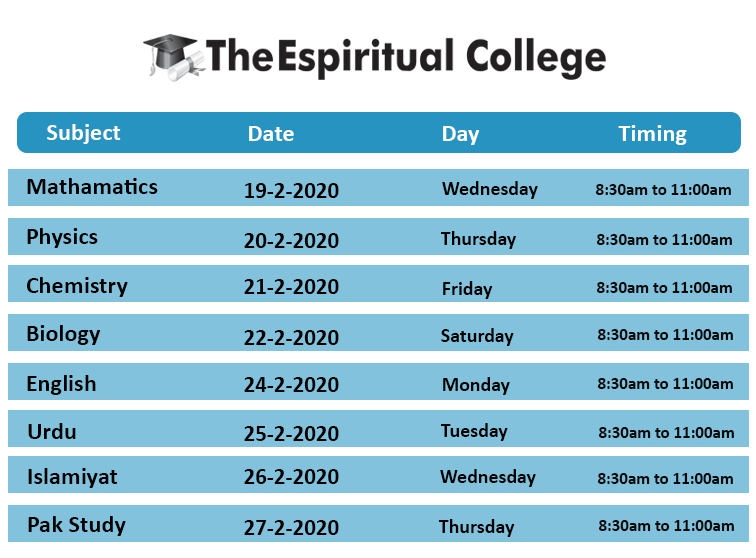
<style>
.page{position:relative;width:756px;height:558px;background:#83c2dc}
.page>*{position:absolute;margin:0}
.t1{font:24.3px "Calibri-Bold";color:#fffefe}
.t2{font:24.3px "Calibri-Bold";color:#ffffff}
.t3{font:24.3px "Calibri-Bold";color:#000000}
.t4{font:23px "Calibri-Bold";color:#000000}
.t5{font:19.9px "Calibri-Bold";color:#000000}
.t6{font:16.9px "Calibri-Bold";color:#0a0a0a}
</style>
<div class="page">
<p class="t1" style="left:47px;top:124px;width:74px;height:20px">Subject</p>
<p class="t2" style="left:249px;top:126px;width:45px;height:15px">Date</p>
<p class="t2" style="left:443px;top:126px;width:37px;height:19px">Day</p>
<p class="t2" style="left:618px;top:125px;width:69px;height:20px">Timing</p>
<p class="t3" style="left:27px;top:178px;width:131px;height:16px">Mathamatics</p>
<p class="t4" style="left:245px;top:183px;width:94px;height:15px">19-2-2020</p>
<p class="t5" style="left:442px;top:181px;width:96px;height:18px">Wednesday</p>
<p class="t6" style="left:595px;top:184px;width:136px;height:11px">8:30am to 11:00am</p>
<p class="t3" style="left:27px;top:228px;width:71px;height:20px">Physics</p>
<p class="t4" style="left:244px;top:233px;width:95px;height:15px">20-2-2020</p>
<p class="t5" style="left:440px;top:231px;width:76px;height:18px">Thursday</p>
<p class="t6" style="left:596px;top:234px;width:136px;height:11px">8:30am to 11:00am</p>
<p class="t3" style="left:27px;top:277px;width:101px;height:20px">Chemistry</p>
<p class="t4" style="left:244px;top:279px;width:95px;height:15px">21-2-2020</p>
<p class="t5" style="left:443px;top:281px;width:50px;height:18px">Friday</p>
<p class="t6" style="left:596px;top:282px;width:136px;height:11px">8:30am to 11:00am</p>
<p class="t3" style="left:27px;top:325px;width:74px;height:20px">Biology</p>
<p class="t5" style="left:441px;top:328px;width:73px;height:18px">Saturday</p>
<p class="t6" style="left:597px;top:329px;width:136px;height:11px">8:30am to 11:00am</p>
<p class="t4" style="left:244px;top:330px;width:95px;height:15px">22-2-2020</p>
<p class="t3" style="left:27px;top:375px;width:69px;height:20px">English</p>
<p class="t4" style="left:244px;top:377px;width:95px;height:15px">24-2-2020</p>
<p class="t5" style="left:443px;top:377px;width:67px;height:18px">Monday</p>
<p class="t6" style="left:597px;top:378px;width:136px;height:11px">8:30am to 11:00am</p>
<p class="t3" style="left:28px;top:423px;width:48px;height:16px">Urdu</p>
<p class="t5" style="left:440px;top:423px;width:68px;height:18px">Tuesday</p>
<p class="t4" style="left:244px;top:426px;width:95px;height:15px">25-2-2020</p>
<p class="t6" style="left:598px;top:427px;width:136px;height:11px">8:30am to 11:00am</p>
<p class="t3" style="left:28px;top:468px;width:90px;height:20px">Islamiyat</p>
<p class="t4" style="left:244px;top:469px;width:95px;height:15px">26-2-2020</p>
<p class="t5" style="left:440px;top:469px;width:96px;height:18px">Wednesday</p>
<p class="t6" style="left:597px;top:473px;width:136px;height:11px">8:30am to 11:00am</p>
<p class="t3" style="left:28px;top:516px;width:98px;height:20px">Pak Study</p>
<p class="t4" style="left:244px;top:520px;width:95px;height:15px">27-2-2020</p>
<p class="t5" style="left:438px;top:519px;width:77px;height:18px">Thursday</p>
<p class="t6" style="left:598px;top:520px;width:136px;height:11px">8:30am to 11:00am</p>
</div>
